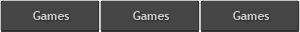
<style>
.page{position:relative;width:300px;height:32px;background:#454545}
.page>*{position:absolute;margin:0}
.t1{font:12px "TrebuchetMS-Bold";color:#cbcbcb}
</style>
<div class="page">
<p class="t1" style="left:33px;top:11px;width:37px;height:9px">Games</p>
<p class="t1" style="left:133px;top:11px;width:37px;height:9px">Games</p>
<p class="t1" style="left:233px;top:11px;width:37px;height:9px">Games</p>
</div>
